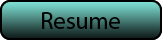
<style>
.page{position:relative;width:162px;height:40px}
.page>*{position:absolute;margin:0}
.t1{font:24px "MyriadHebrew-Regular";color:#000000}
</style>
<div class="page">
<p class="t1" style="left:42px;top:12px;width:78px;height:17px">Resume</p>
</div>
